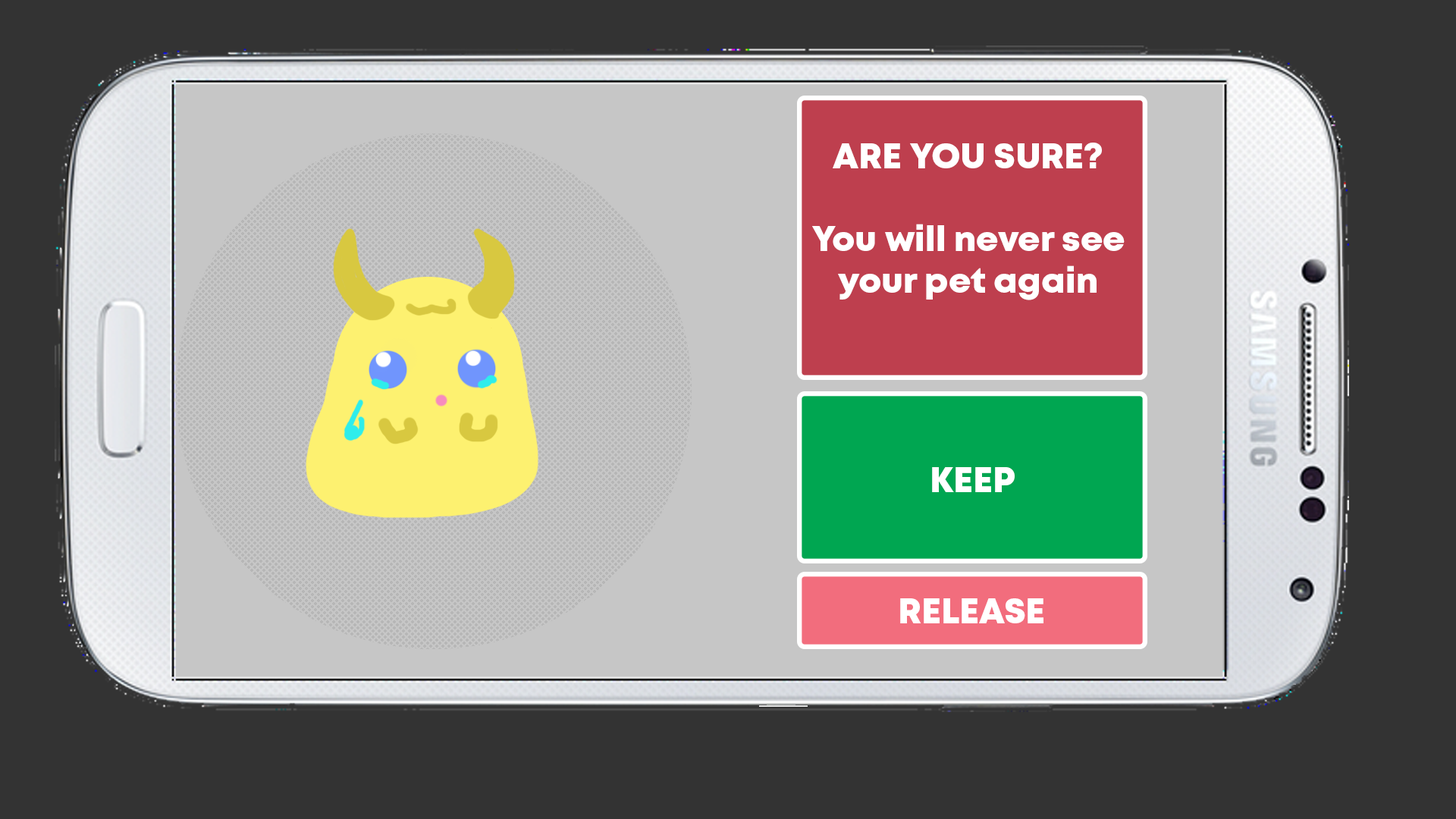
<style>
.page{position:relative;width:1456px;height:819px;background:#333333}
.page>*{position:absolute;margin:0}
.t1{font:34.8px "Mont-HeavyDEMO";color:#ffffff}
</style>
<div class="page">
<p class="t1" style="left:812px;top:143px;width:313px;height:157px;text-align:center">ARE YOU SURE?<br><br>You will never see<br>your pet again</p>
<p class="t1" style="left:932px;top:467px;width:83px;height:25px">KEEP</p>
<p class="t1" style="left:900px;top:598px;width:143px;height:25px">RELEASE</p>
</div>
